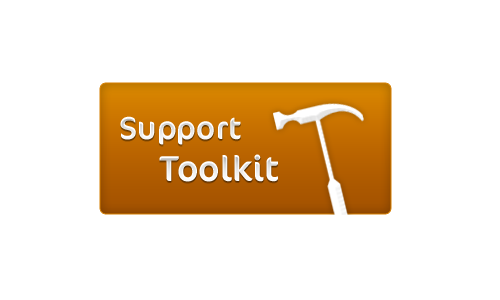
<style>
.page{position:relative;width:500px;height:300px;background:#ffffff}
.page>*{position:absolute;margin:0}
.t1{font:32px "CoconOT-Regular";color:#ffffff}
.t2{font:36px "CoconOT-Regular";color:#ffffff}
</style>
<div class="page">
<p class="t1" style="left:120px;top:116px;width:121px;height:29px">Support</p>
<p class="t2" style="left:159px;top:154px;width:119px;height:28px">Toolkit</p>
</div>
